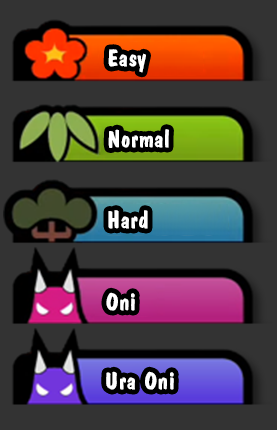
<style>
.page{position:relative;width:277px;height:430px;background:#333333}
.page>*{position:absolute;margin:0}
.t1{font:24.9px "Eng-DFPKanteiryu-XB";color:#ffffff}
</style>
<div class="page">
<p class="t1" style="left:108px;top:49px;width:38px;height:24px">Easy</p>
<p class="t1" style="left:108px;top:129px;width:61px;height:19px">Normal</p>
<p class="t1" style="left:108px;top:210px;width:40px;height:19px">Hard</p>
<p class="t1" style="left:106px;top:292px;width:29px;height:19px">Oni</p>
<p class="t1" style="left:106px;top:371px;width:68px;height:19px">Ura Oni</p>
</div>
